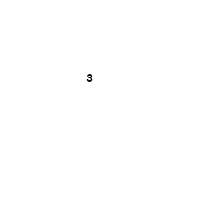
<style>
.page{position:relative;width:200px;height:200px;background:#ffffff}
.page>*{position:absolute;margin:0}
.t1{font:11px "ComicSansMS-Bold";color:#000000}
</style>
<div class="page">
<p class="t1" style="left:86px;top:74px;width:7px;height:8px">3</p>
</div>
